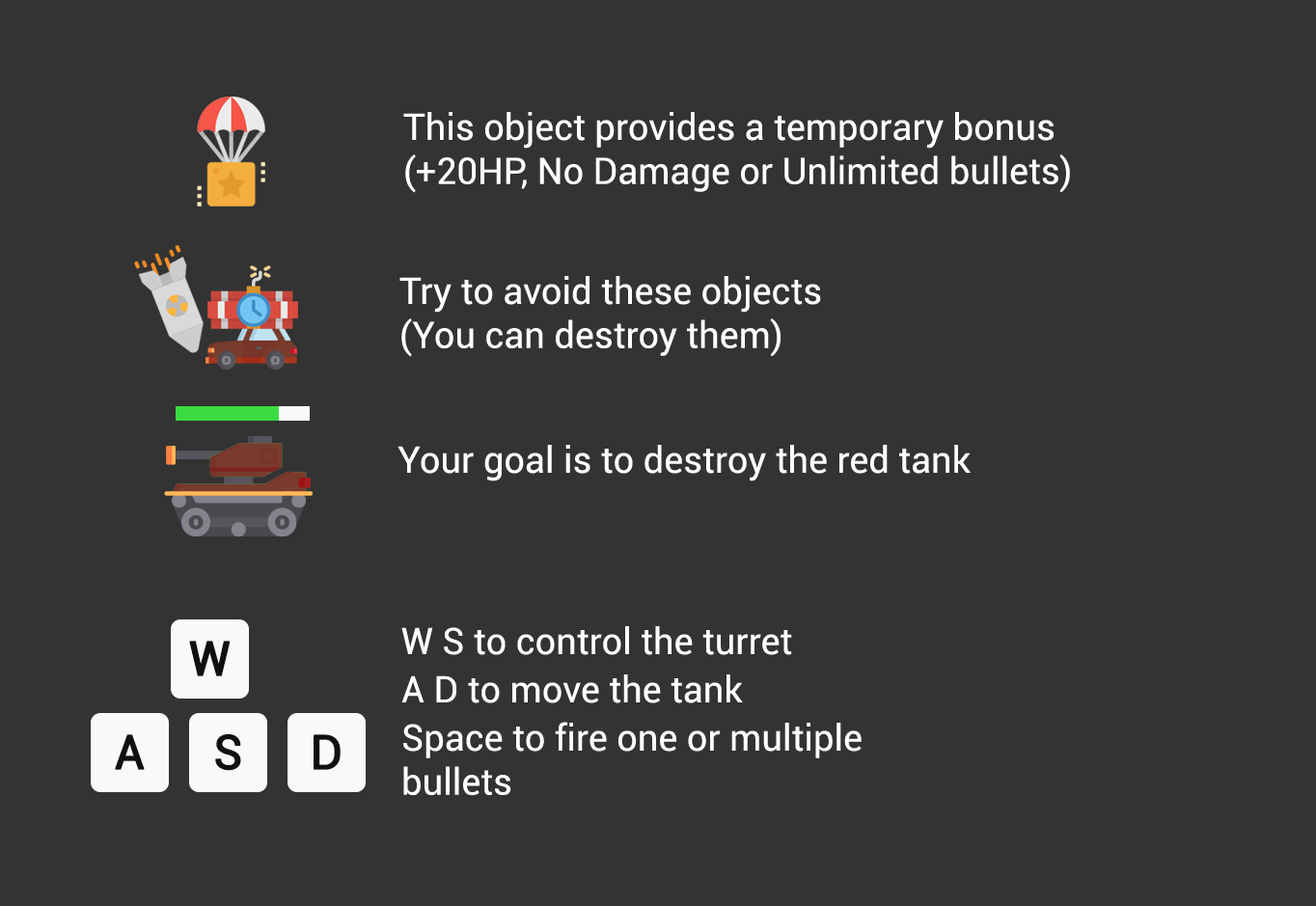
<style>
.page{position:relative;width:1316px;height:906px;background:#333333}
.page>*{position:absolute;margin:0}
.t1{font:36.7px "Roboto-Regular";color:#ffffff}
.t2{font:47.3px "Roboto-Regular";color:#101010;font-weight:bold}
</style>
<div class="page">
<p class="t1" style="left:403px;top:112px;width:667px;height:81px">This object provides a temporary bonus<br>(+20HP, No Damage or Unlimited bullets)</p>
<p class="t1" style="left:399px;top:276px;width:422px;height:81px">Try to avoid these objects<br>(You can destroy them)</p>
<p class="t1" style="left:398px;top:445px;width:573px;height:36px">Your goal is to destroy the red tank</p>
<p class="t1" style="left:401px;top:626px;width:391px;height:29px">W S to control the turret</p>
<p class="t2" style="left:189px;top:641px;width:42px;height:35px">W</p>
<p class="t1" style="left:401px;top:674px;width:342px;height:29px">A D to move the tank</p>
<p class="t1" style="left:403px;top:722px;width:459px;height:74px">Space to fire one or multiple<br>bullets</p>
<p class="t2" style="left:115px;top:734px;width:30px;height:36px">A</p>
<p class="t2" style="left:215px;top:733px;width:26px;height:38px">S</p>
<p class="t2" style="left:314px;top:734px;width:27px;height:36px">D</p>
</div>
